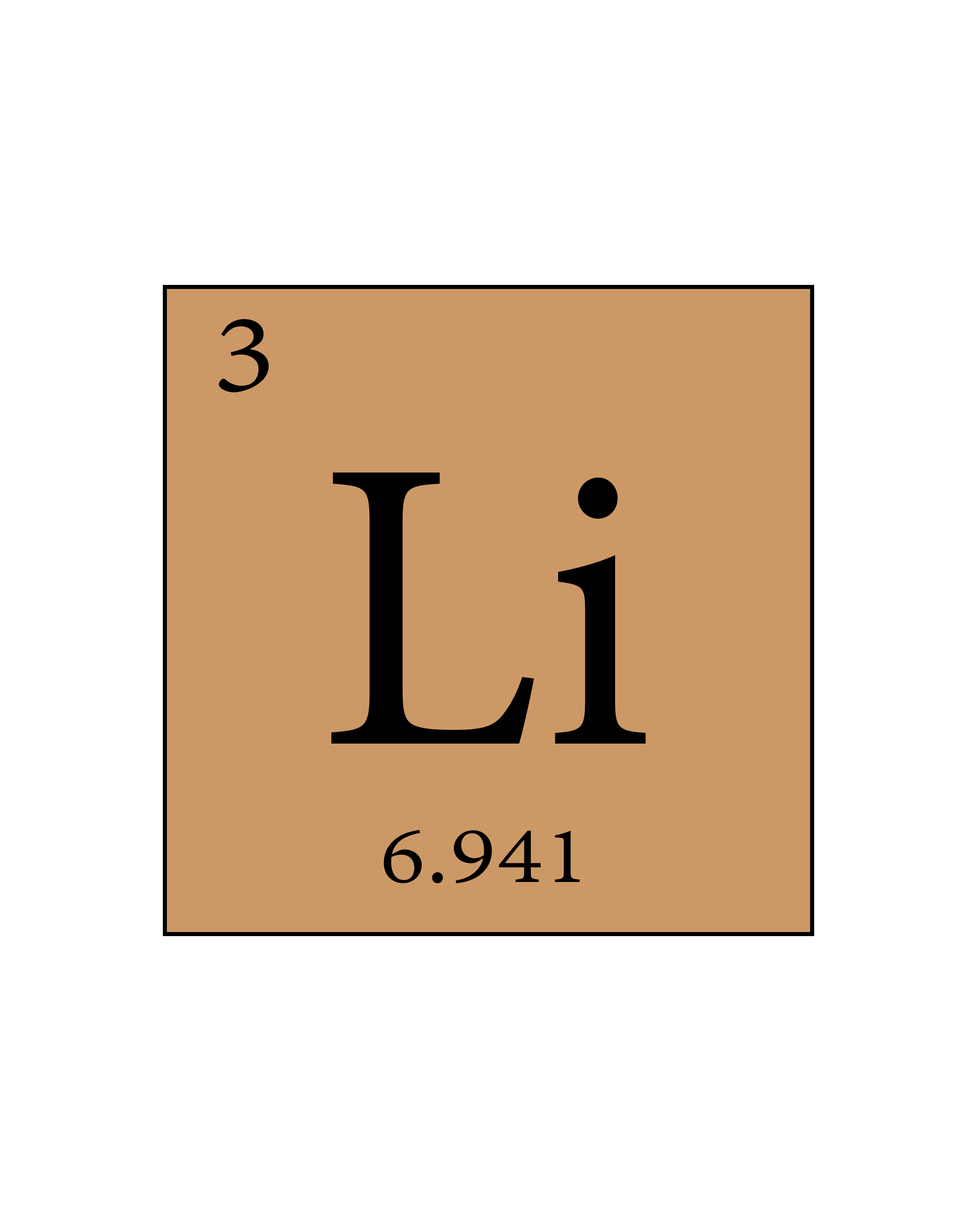
<style>
.page{position:relative;width:977px;height:1221px;background:#ffffff}
.page>*{position:absolute;margin:0}
.t1{font:169.6px "AdobeThai-Regular";color:#000000}
.t2{font:508.7px "AdobeThai-Regular";color:#000000}
.t3{font:122.1px "AdobeThai-Regular";color:#000000}
</style>
<div class="page">
<p class="t1" style="left:219px;top:319px;width:50px;height:73px">3</p>
<p class="t2" style="left:331px;top:472px;width:314px;height:272px">Li</p>
<p class="t3" style="left:383px;top:830px;width:197px;height:53px">6.941</p>
</div>
